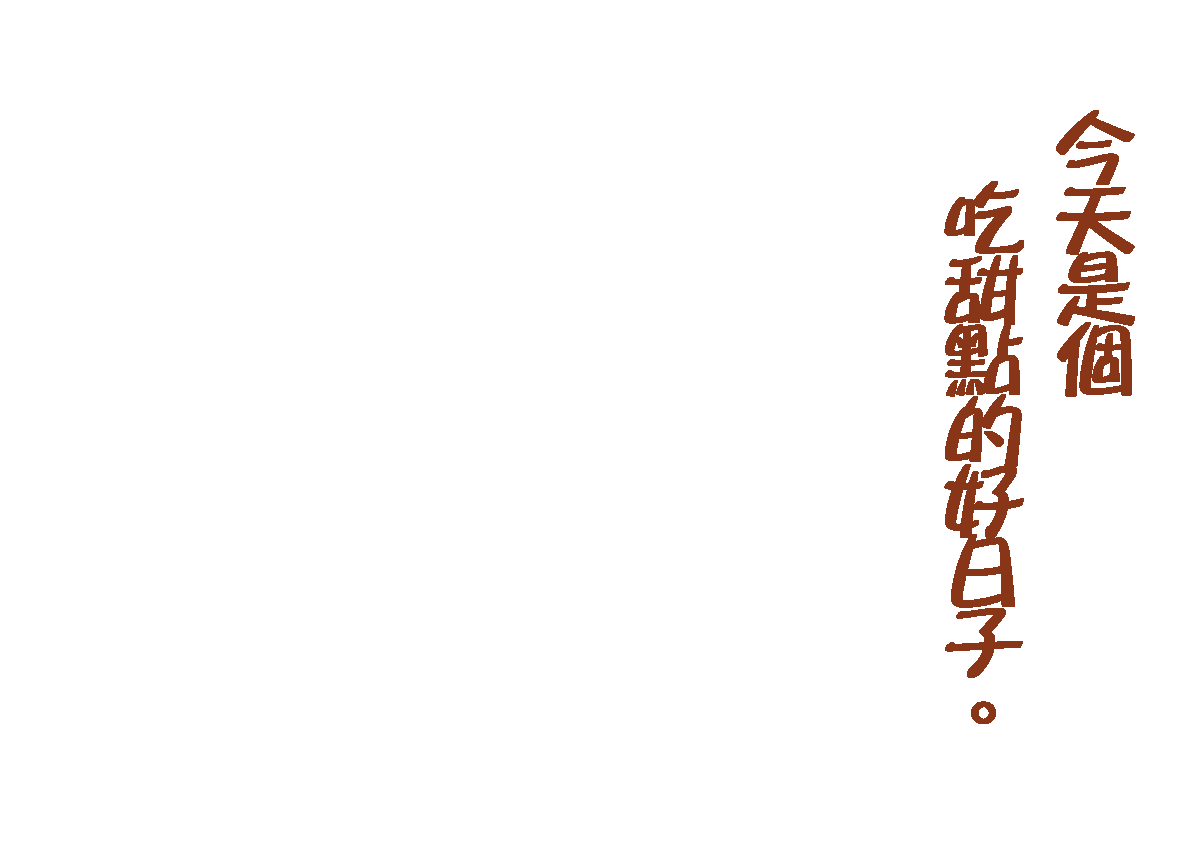
<style>
.page{position:relative;width:1200px;height:848px;background:#ffffff}
.page>*{position:absolute;margin:0}
.t1{font:81.9px/70.7px "DFPuDing-W7-WIN-BF";color:#893517;font-weight:bold}
</style>
<div class="page">
<p class="t1" style="left:1056px;top:110px;width:79px;height:287px;text-align:right">今<br>天<br>是<br>個</p>
<p class="t1" style="left:944px;top:181px;width:80px;height:543px;text-align:right">吃<br>甜<br>點<br>的<br>好<br>日<br>子<br>。</p>
</div>
